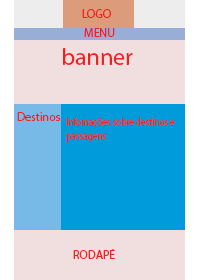
<style>
.page{position:relative;width:200px;height:280px;background:#f1dede}
.page>*{position:absolute;margin:0}
.t1{font:12px "MyriadPro-Regular";color:#f32020}
.t2{font:24px "MyriadPro-Regular";color:#f32020}
.t3{font:12px "MyriadPro-Regular";color:#f32020;scale:0.76 1}
</style>
<div class="page">
<p class="t1" style="left:82px;top:9px;width:29px;height:9px">LOGO</p>
<p class="t1" style="left:84px;top:28px;width:31px;height:9px">MENU</p>
<p class="t2" style="left:63px;top:48px;width:70px;height:17px">banner</p>
<p class="t1" style="left:17px;top:112px;width:44px;height:9px">Destinos</p>
<p class="t3" style="left:66px;top:117px;width:109px;height:26px">Infomações sobre destinos e <br>passagens</p>
<p class="t1" style="left:73px;top:249px;width:42px;height:10px">RODAPÉ</p>
</div>
